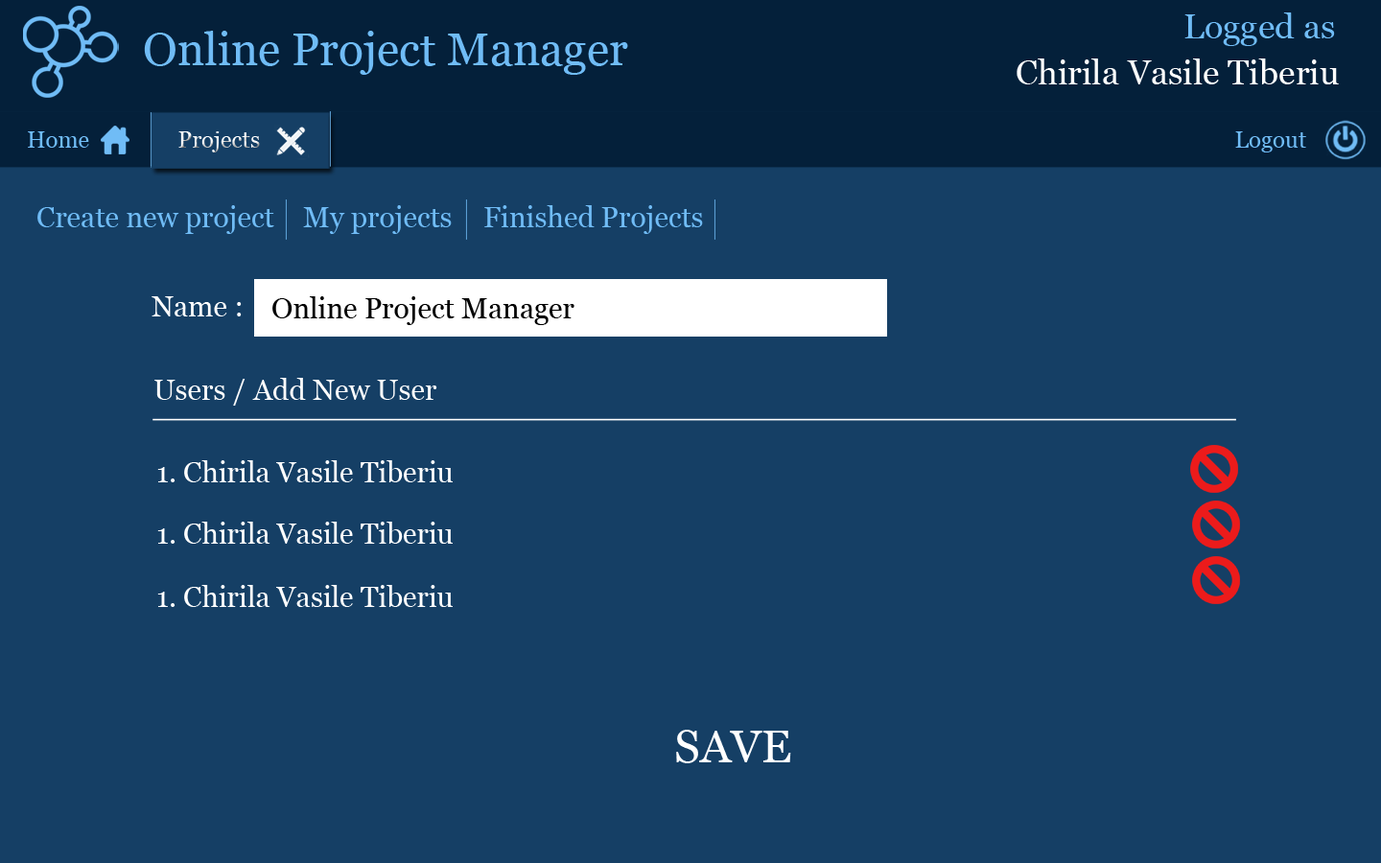
<style>
.page{position:relative;width:1381px;height:863px;background:#153f65}
.page>*{position:absolute;margin:0}
.t1{font:34.5px "Georgia";color:#70bcf6}
.t2{font:46px "Georgia";color:#70bcf6}
.t3{font:34.5px "Georgia";color:#fefefe}
.t4{font:23px "Georgia";color:#70bcf6}
.t5{font:23px "Georgia"}
.t6{font:28.8px "Georgia";color:#ffffff}
.t7{font:28.8px "Georgia";color:#000000}
.t8{font:46px "Georgia";color:#ffffff}
</style>
<div class="page">
<p class="t1" style="left:1185px;top:12px;width:150px;height:34px">Logged as</p>
<p class="t2" style="left:144px;top:31px;width:484px;height:44px">Online Project Manager</p>
<p class="t3" style="left:1017px;top:59px;width:322px;height:25px">Chirila Vasile Tiberiu</p>
<p class="t4" style="left:28px;top:131px;width:61px;height:17px">Home</p>
<p class="t5" style="left:178px;top:131px;width:82px;height:22px">Projects</p>
<p class="t4" style="left:1235px;top:131px;width:71px;height:22px">Logout</p>
<p class="t6" style="left:152px;top:296px;width:90px;height:21px">Name :</p>
<p class="t7" style="left:272px;top:296px;width:303px;height:29px">Online Project Manager</p>
<p class="t6" style="left:154px;top:378px;width:283px;height:28px">Users / Add New User</p>
<p class="t6" style="left:157px;top:460px;width:296px;height:22px">1. Chirila Vasile Tiberiu</p>
<p class="t6" style="left:157px;top:522px;width:296px;height:22px">1. Chirila Vasile Tiberiu</p>
<p class="t6" style="left:157px;top:585px;width:296px;height:22px">1. Chirila Vasile Tiberiu</p>
<p class="t8" style="left:676px;top:730px;width:115px;height:34px">SAVE</p>
</div>
